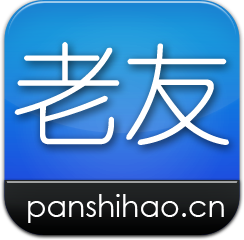
<style>
.page{position:relative;width:244px;height:240px}
.page>*{position:absolute;margin:0}
.t1{font:110px "YouYuan";color:#ffffff}
.t2{font:30px "CenturyGothic";color:#ffffff}
</style>
<div class="page">
<p class="t1" style="left:14px;top:42px;width:215px;height:103px">老友</p>
<p class="t2" style="left:28px;top:194px;width:196px;height:29px">panshihao.cn</p>
</div>
